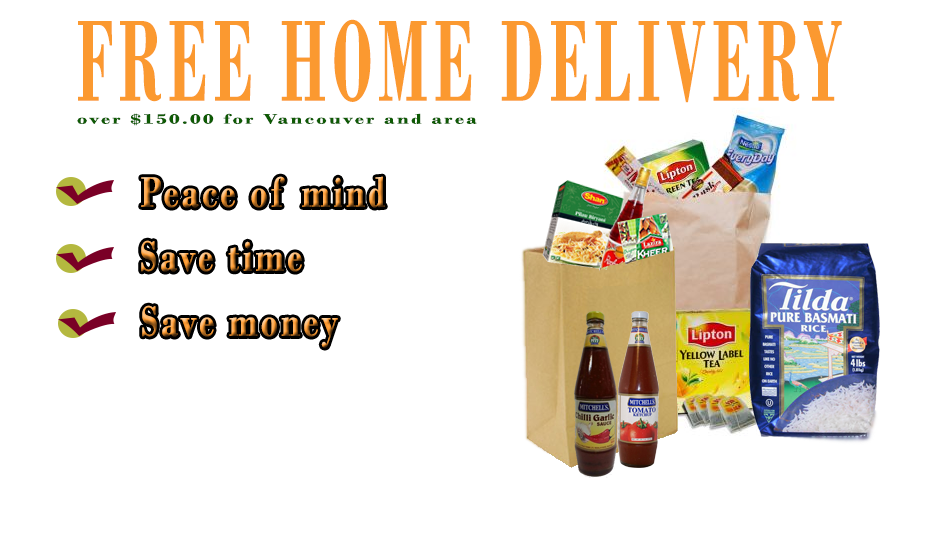
<style>
.page{position:relative;width:950px;height:534px;background:#ffffff}
.page>*{position:absolute;margin:0}
.t1{font:208.8px "BodoniMT-Bold";letter-spacing:0.1em;color:#fb9930;scale:0.5 1}
.t2{font:25.3px "BodoniMT-Bold";letter-spacing:0.1em;color:#0e5a04;scale:1.48 1}
.t3{font:77.5px "BodoniMT-Bold";letter-spacing:0.1em;scale:0.76 1}
</style>
<div class="page">
<p class="t1" style="left:78px;top:19px;width:764px;height:84px">FREE HOME DELIVERY</p>
<p class="t2" style="left:77px;top:113px;width:400px;height:13px">over $150.00 for Vancouver and area</p>
<p class="t3" style="left:142px;top:305px;width:196px;height:43px">Save money</p>
</div>
